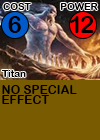
<style>
.page{position:relative;width:100px;height:140px;background:#795b01}
.page>*{position:absolute;margin:0}
.t1{font:9.7px "ArialRoundedMTBold";letter-spacing:0.01em;color:#000000}
.t2{font:24px "ArialRoundedMTBold";letter-spacing:0.01em;color:#000000}
.t3{font:24px "ArialRoundedMTBold";letter-spacing:-0.1em;color:#000000}
.t4{font:12px/10px "ArialRoundedMTBold";letter-spacing:0.01em;color:#000000}
</style>
<div class="page">
<p class="t1" style="left:3px;top:3px;width:28px;height:7px">COST</p>
<p class="t1" style="left:60px;top:3px;width:38px;height:7px">POWER</p>
<p class="t2" style="left:8px;top:16px;width:13px;height:17px">6</p>
<p class="t3" style="left:70px;top:16px;width:24px;height:17px">12</p>
<p class="t1" style="left:2px;top:70px;width:24px;height:7px">Titan</p>
<p class="t4" style="left:2px;top:85px;width:75px;height:19px">NO SPECIAL <br>EFFECT</p>
</div>
